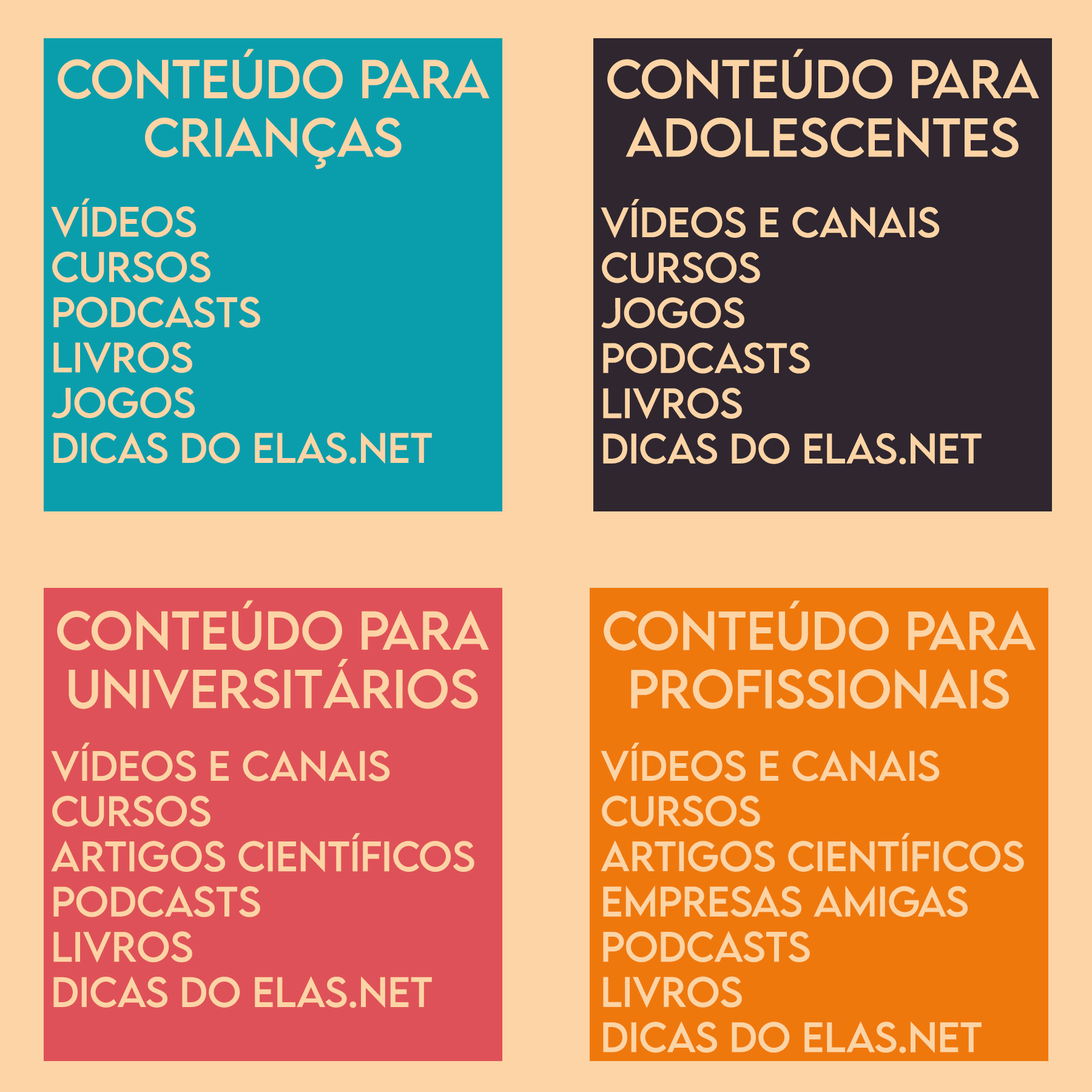
<style>
.page{position:relative;width:1092px;height:1092px;background:#fcd4a5}
.page>*{position:absolute;margin:0}
.t1{font:48.6px "LEMONMILK-Regular";color:#fcd4a5}
.t2{font:37.7px "LEMONMILK-Regular";color:#fcd4a5}
</style>
<div class="page">
<p class="t1" style="left:58px;top:49px;width:432px;height:120px;text-align:center">conteúdo para<br>crianças</p>
<p class="t1" style="left:607px;top:49px;width:432px;height:109px;text-align:center">conteúdo para<br>adolescentes</p>
<p class="t2" style="left:51px;top:198px;width:381px;height:266px">vídeos<br>cursos<br>podcasts<br>livros <br>jogos<br>dicas do elas.net</p>
<p class="t2" style="left:601px;top:199px;width:381px;height:266px">vídeos e canais<br>cursos <br>jogos<br>podcasts<br>livros<br>dicas do elas.net</p>
<p class="t1" style="left:57px;top:600px;width:432px;height:109px;text-align:center">conteúdo para<br>universitários</p>
<p class="t1" style="left:604px;top:601px;width:432px;height:108px;text-align:center">conteúdo para<br>profissionais</p>
<p class="t2" style="left:51px;top:743px;width:423px;height:265px">vídeos e canais<br>cursos<br>artigos científicos<br>podcasts<br>livros<br>dicas do elas.net</p>
<p class="t2" style="left:601px;top:743px;width:423px;height:310px">vídeos e canais<br>cursos<br>artigos científicos<br>empresas amigas<br>podcasts<br>livros<br>dicas do elas.net</p>
</div>
